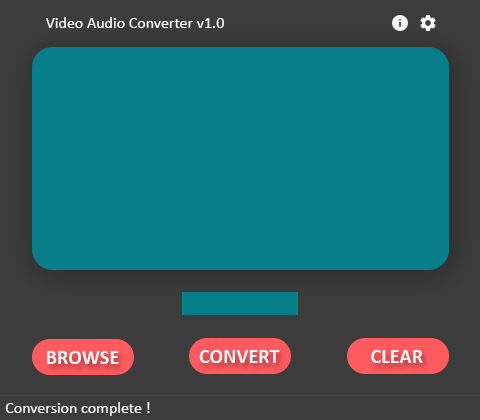
<style>
.page{position:relative;width:480px;height:420px;background:#087e8b}
.page>*{position:absolute;margin:0}
.t1{font:16px "Calibri";color:#f5f5f5}
.t2{font:20.2px "Calibri-Bold";color:#f5f5f5}
</style>
<div class="page">
<p class="t1" style="left:45px;top:17px;width:179px;height:11px">Video Audio Converter v1.0</p>
<p class="t2" style="left:47px;top:351px;width:72px;height:13px">BROWSE</p>
<p class="t2" style="left:199px;top:350px;width:81px;height:13px">CONVERT</p>
<p class="t2" style="left:371px;top:350px;width:52px;height:13px">CLEAR</p>
<p class="t1" style="left:5px;top:402px;width:145px;height:14px">Conversion complete !</p>
</div>
